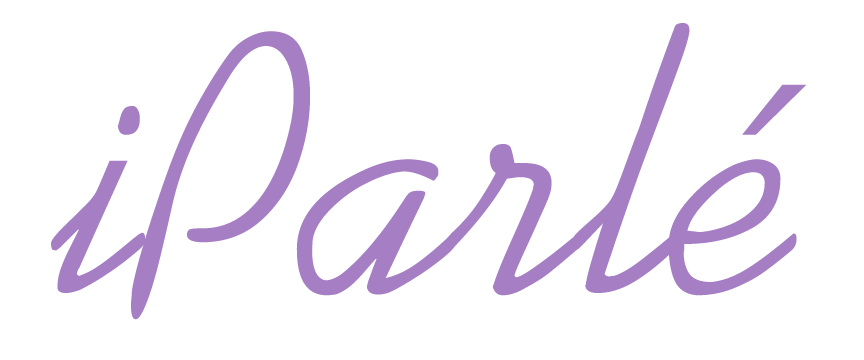
<style>
.page{position:relative;width:864px;height:360px;background:#ffffff}
.page>*{position:absolute;margin:0}
.t1{font:375px "SwensonRegular";color:#a57ec3}
</style>
<div class="page">
<p class="t1" style="left:51px;top:23px;width:756px;height:297px">iParlé</p>
</div>
